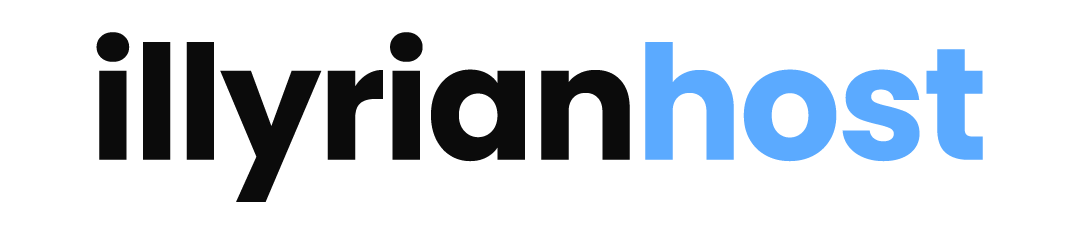
<style>
.page{position:relative;width:1080px;height:235px;background:#ffffff}
.page>*{position:absolute;margin:0}
.t1{font:159.1px "Poppins-Bold";letter-spacing:-0.02em;color:#0b0b0b}
.t2{font:159.1px "Poppins-Bold";letter-spacing:-0.02em;color:#5baaff}
</style>
<div class="page">
<p class="t1" style="left:96px;top:32px;width:887px;height:170px">illyrian<span class="t2">host</span></p>
</div>
